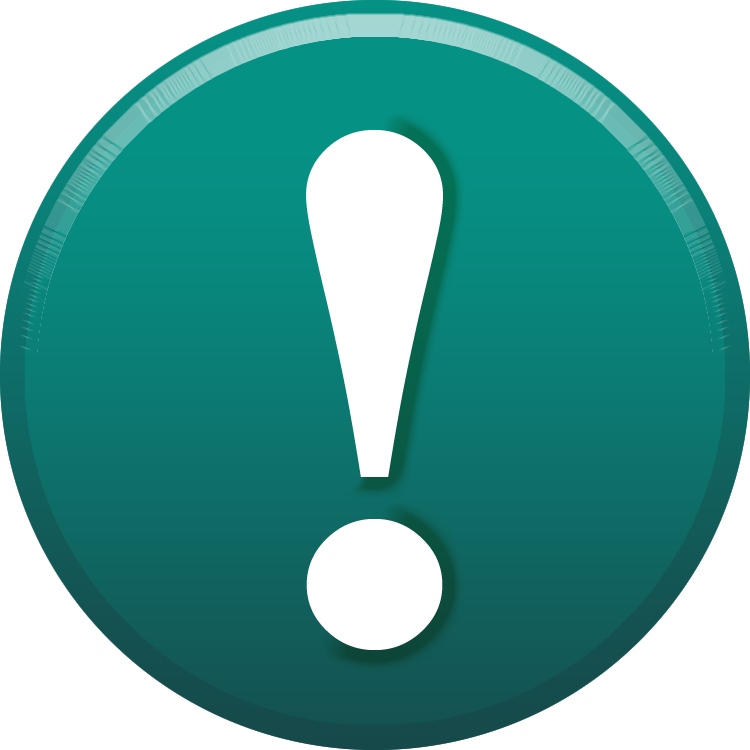
<style>
.page{position:relative;width:750px;height:750px;background:#ffffff}
.page>*{position:absolute;margin:0}
.t1{font:720px "Georgia-Bold";color:#ffffff}
</style>
<div class="page">
<p class="t1" style="left:306px;top:129px;width:137px;height:521px">!</p>
</div>
